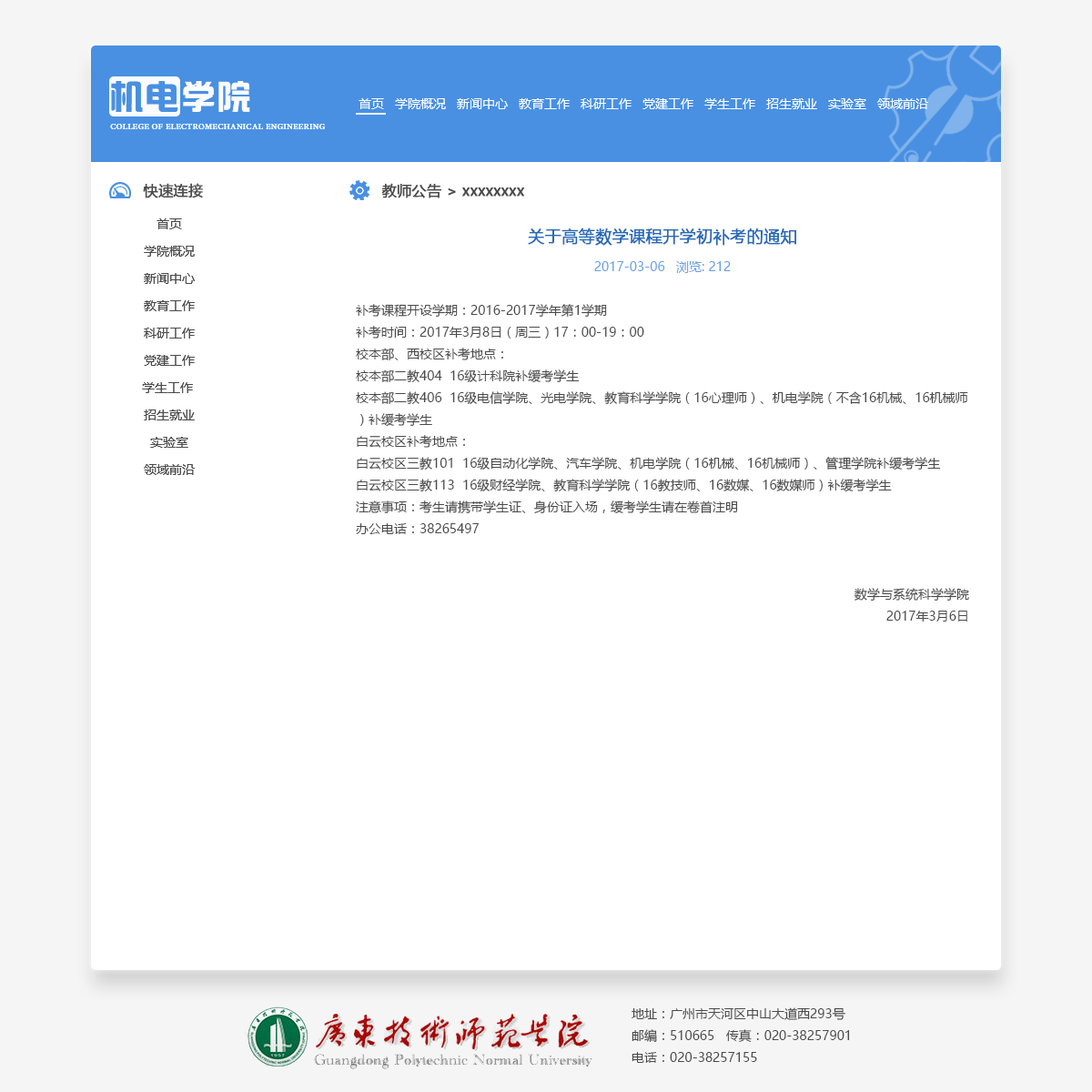
<style>
.page{position:relative;width:1092px;height:1092px;background:#ffffff}
.page>*{position:absolute;margin:0}
.t1{font:12.7px "MicrosoftYaHei";color:#fafbfc;font-variant:small-caps}
.t2{font:10.9px "MinionPro-Regular";color:#fafbfc;font-variant:small-caps}
.t3{font:14.6px "MicrosoftYaHei";color:#4a4a4a;font-weight:bold}
.t4{font:12.7px/27.3px "MicrosoftYaHei";color:#4a4a4a;font-variant:small-caps}
.t5{font:12.7px/21.8px "MicrosoftYaHei";color:#4a4a4a}
.t6{font:16.4px/32.8px "MicrosoftYaHei";color:#266ab8;font-weight:bold}
.t7{font:12.7px/21.8px "MicrosoftYaHei";color:#65a1e5}
</style>
<div class="page">
<p class="t1" style="left:359px;top:98px;width:569px;height:11px">首页   学院概况   新闻中心   教育工作   科研工作   党建工作   学生工作   招生就业   实验室   领域前沿</p>
<p class="t2" style="left:110px;top:123px;width:215px;height:6px">college of electromechanical engineering</p>
<p class="t3" style="left:143px;top:183px;width:60px;height:15px">快速连接</p>
<p class="t3" style="left:381px;top:183px;width:144px;height:15px">教师公告 &gt; xxxxxxxx</p>
<p class="t4" style="left:142px;top:218px;width:53px;height:257px;text-align:center">首页<br>学院概况<br>新闻中心<br>教育工作<br>科研工作<br>党建工作<br>学生工作 <br>招生就业<br>实验室<br>领域前沿</p>
<p class="t5" style="left:356px;top:227px;width:613px;height:395px;text-align:center"><span class="t6">关于高等数学课程开学初补考的通知<br></span><span class="t7">2017-03-06   浏览: 212<br></span> <br>补考课程开设学期：2016-2017学年第1学期<br>补考时间：2017年3月8日（周三）17：00-19：00<br>校本部、西校区补考地点：<br>校本部二教404  16级计科院补缓考学生<br>校本部二教406  16级电信学院、光电学院、教育科学学院（16心理师）、机电学院（不含16机械、16机械师）补缓考学生<br>白云校区补考地点：<br>白云校区三教101  16级自动化学院、汽车学院、机电学院（16机械、16机械师）、管理学院补缓考学生<br>白云校区三教113  16级财经学院、教育科学学院（16教技师、16数媒、16数媒师）补缓考学生<br>注意事项：考生请携带学生证、身份证入场，缓考学生请在卷首注明<br>办公电话：38265497<br> <br> <br>数学与系统科学学院<br>2017年3月6日</p>
<p class="t5" style="left:632px;top:1007px;width:218px;height:56px">地址：广州市天河区中山大道西293号<br>邮编：510665   传真：020-38257901<br>电话：020-38257155</p>
</div>
